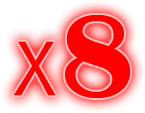
<style>
.page{position:relative;width:145px;height:113px;background:#fe0000}
.page>*{position:absolute;margin:0}
.t1{font:100px "HGGothicM";color:#fe0000}
.t2{font:120px "BritannicBold";color:#fe0000}
</style>
<div class="page">
<p class="t1" style="left:13px;top:15px;width:118px;height:83px">x<span class="t2">8</span></p>
</div>
